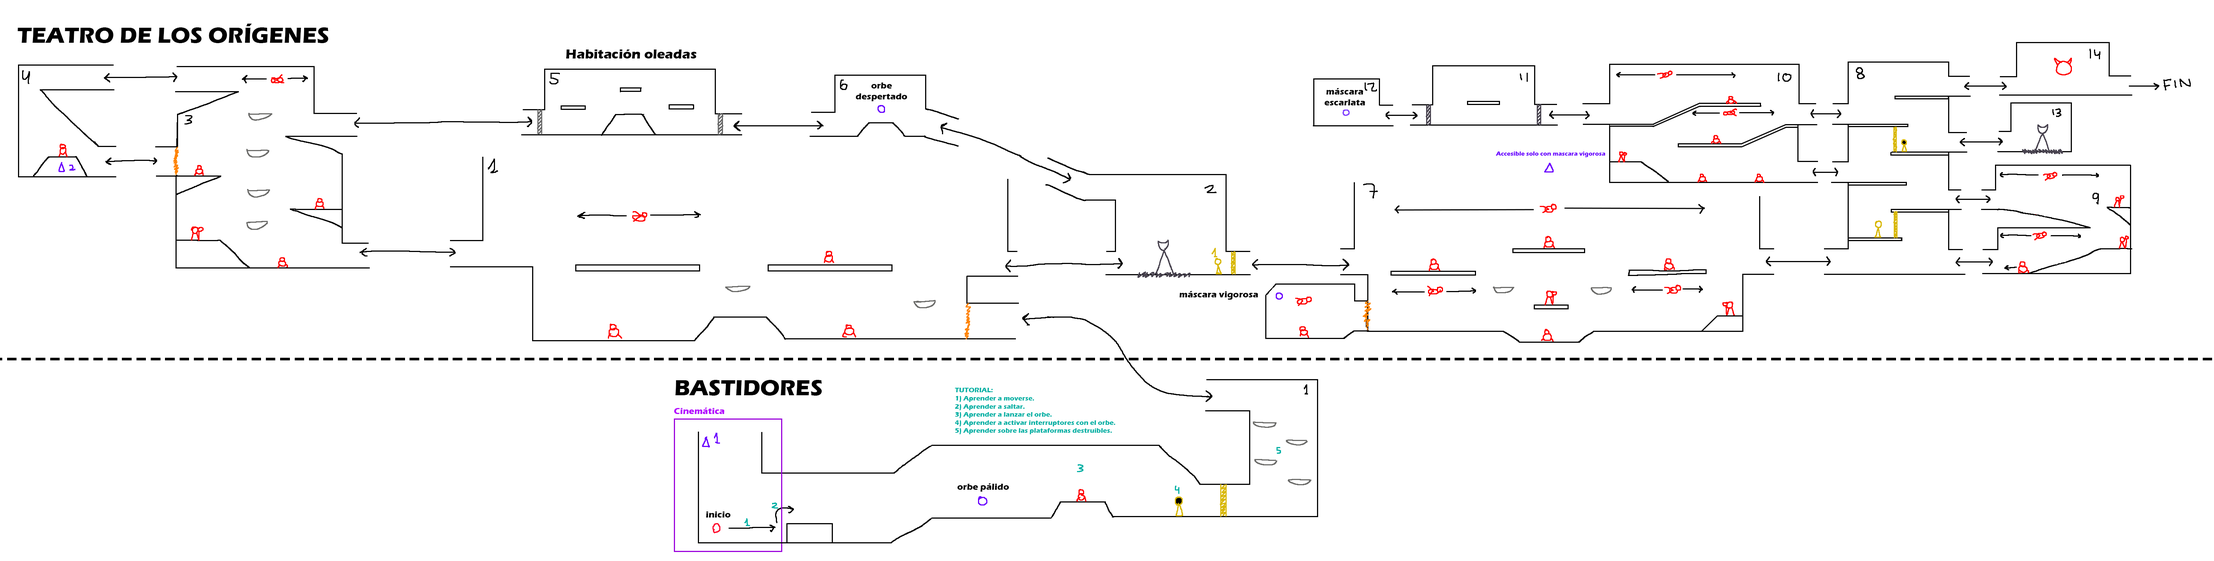
<style>
.page{position:relative;width:2214px;height:561px;background:#ffffff}
.page>*{position:absolute;margin:0}
.t1{font:22.5px "ErasITC-Bold";color:#000000}
.t2{font:13.5px "ErasITC-Bold";color:#000000}
.t3{font:9px "ErasITC-Bold";color:#000000}
.t4{font:6px "ErasITC-Bold";color:#6a00ff}
.t5{font:6.7px "ErasITC-Bold";color:#00b0a4}
.t6{font:9px "ErasITC-Bold";color:#b300ff}
</style>
<div class="page">
<p class="t1" style="left:18px;top:24px;width:310px;height:19px">TEATRO DE LOS ORÍGENES</p>
<p class="t2" style="left:566px;top:50px;width:130px;height:8px">Habitación oleadas</p>
<p class="t3" style="left:856px;top:82px;width:51px;height:19px;text-align:center">orbe despertado</p>
<p class="t3" style="left:1324px;top:88px;width:41px;height:17px;text-align:center">máscara<br>escarlata</p>
<p class="t4" style="left:1496px;top:152px;width:109px;height:5px">Accesible solo con mascara vigorosa</p>
<p class="t3" style="left:1179px;top:291px;width:79px;height:9px">máscara vigorosa</p>
<p class="t1" style="left:675px;top:380px;width:147px;height:16px">BASTIDORES</p>
<p class="t5" style="left:955px;top:388px;width:160px;height:46px">TUTORIAL:<br>1) Aprender a moverse.<br>2) Aprender a saltar.<br>3) Aprender a lanzar el orbe.<br>4) Aprender a activar interruptores con el orbe.<br>5) Aprender sobre las plataformas destruíbles.</p>
<p class="t6" style="left:674px;top:408px;width:50px;height:6px">Cinemática</p>
<p class="t3" style="left:957px;top:483px;width:52px;height:9px">orbe pálido</p>
<p class="t3" style="left:706px;top:512px;width:24px;height:6px">inicio</p>
</div>
